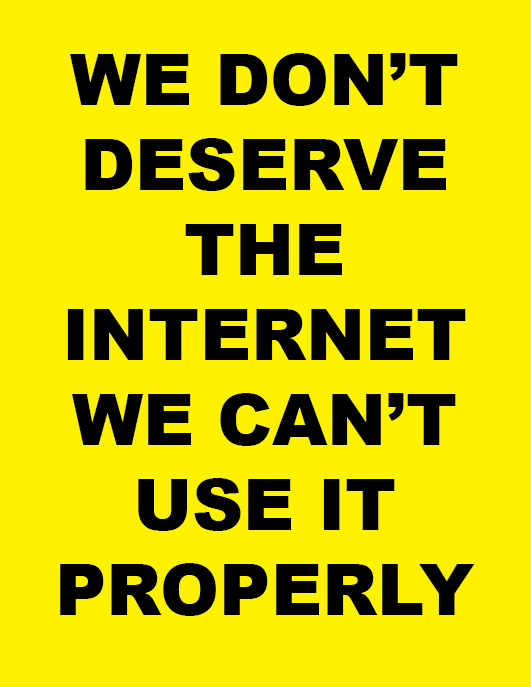
<style>
.page{position:relative;width:531px;height:687px;background:#fff200}
.page>*{position:absolute;margin:0}
.t1{font:70.8px "Arial-Black";color:#000000}
</style>
<div class="page">
<p class="t1" style="left:60px;top:53px;width:415px;height:563px;text-align:center">WE DON’T DESERVE THE        INTERNET WE CAN’T USE IT PROPERLY</p>
</div>
